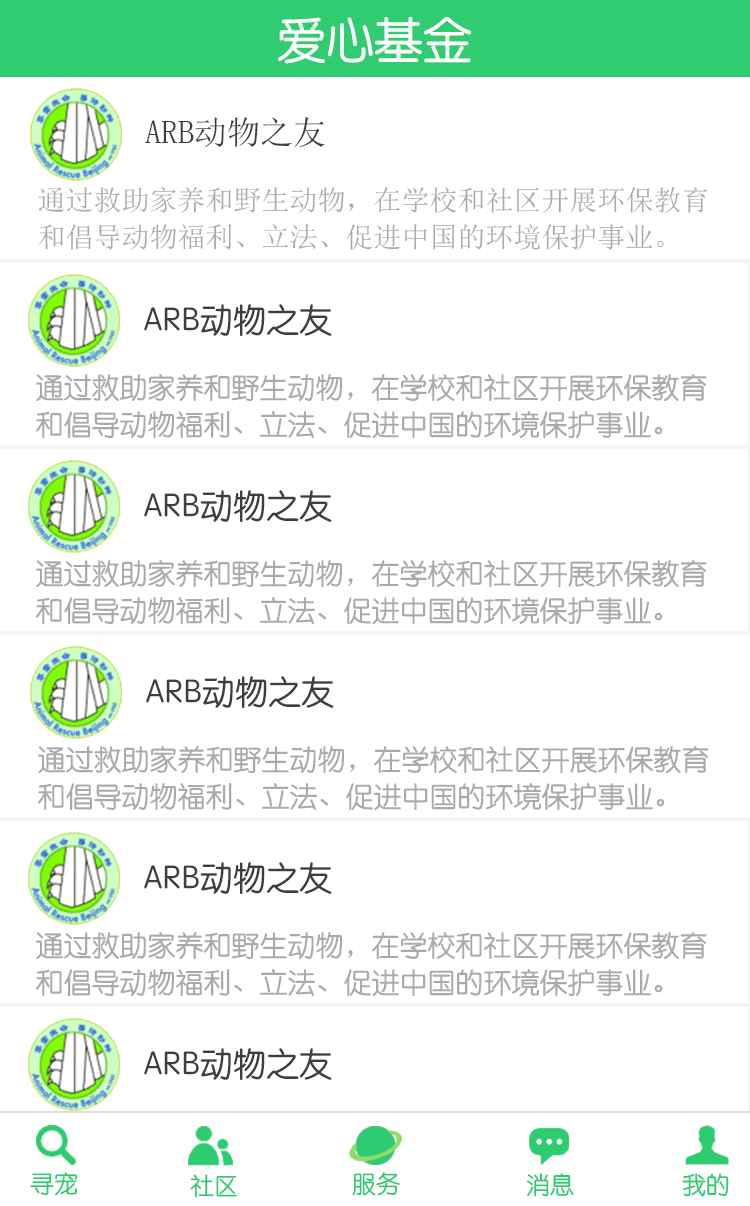
<style>
.page{position:relative;width:750px;height:1206px;background:#ffffff}
.page>*{position:absolute;margin:0}
.t1{font:48.7px "STYuanti-SC-Regular";color:#ffffff}
.t2{font:33px "SimSun";color:#3e3e3e}
.t3{font:28px/37px "SimSun";color:#aaaaaa}
.t4{font:28px "SimSun";color:#aaaaaa}
.t5{font:33px "STYuanti-SC-Regular";color:#3e3e3e}
.t6{font:28px/37px "STYuanti-SC-Regular";color:#aaaaaa}
.t7{font:28px "STYuanti-SC-Regular";color:#aaaaaa}
.t8{font:24px "STYuanti-SC-Regular";color:#2ecc71}
.t9{font:24px "STYuanti-SC-Regular"}
</style>
<div class="page">
<p class="t1" style="left:278px;top:17px;width:193px;height:47px">爱心基金</p>
<p class="t2" style="left:145px;top:117px;width:180px;height:31px">ARB动物之友</p>
<p class="t3" style="left:38px;top:187px;width:670px;height:63px">通过救助家养和野生动物，在学校和社区开展环保教育和倡导动物福利、立法、促进中国的环境<span class="t4">保护事业。</span></p>
<p class="t5" style="left:144px;top:304px;width:188px;height:32px">ARB动物之友</p>
<p class="t6" style="left:36px;top:374px;width:671px;height:64px">通过救助家养和野生动物，在学校和社区开展环保教育和倡导动物福利、立法、促进中国的环境<span class="t7">保护事业。</span></p>
<p class="t5" style="left:144px;top:490px;width:188px;height:32px">ARB动物之友</p>
<p class="t6" style="left:36px;top:560px;width:671px;height:64px">通过救助家养和野生动物，在学校和社区开展环保教育和倡导动物福利、立法、促进中国的环境<span class="t7">保护事业。</span></p>
<p class="t5" style="left:146px;top:676px;width:188px;height:32px">ARB动物之友</p>
<p class="t6" style="left:38px;top:746px;width:671px;height:64px">通过救助家养和野生动物，在学校和社区开展环保教育和倡导动物福利、立法、促进中国的环境<span class="t7">保护事业。</span></p>
<p class="t5" style="left:144px;top:862px;width:188px;height:32px">ARB动物之友</p>
<p class="t6" style="left:36px;top:932px;width:671px;height:64px">通过救助家养和野生动物，在学校和社区开展环保教育和倡导动物福利、立法、促进中国的环境<span class="t7">保护事业。</span></p>
<p class="t5" style="left:144px;top:1048px;width:188px;height:32px">ARB动物之友</p>
<p class="t8" style="left:30px;top:1172px;width:48px;height:24px">寻宠</p>
<p class="t8" style="left:190px;top:1174px;width:47px;height:24px">社区</p>
<p class="t9" style="left:352px;top:1173px;width:48px;height:24px">服务</p>
<p class="t8" style="left:352px;top:1172px;width:48px;height:24px">服务</p>
<p class="t9" style="left:526px;top:1173px;width:47px;height:24px">消息</p>
<p class="t8" style="left:527px;top:1173px;width:47px;height:24px">消息</p>
<p class="t8" style="left:682px;top:1173px;width:47px;height:24px">我的</p>
<p class="t8" style="left:682px;top:1173px;width:47px;height:24px">我的</p>
</div>
